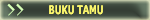
<style>
.page{position:relative;width:150px;height:20px}
.page>*{position:absolute;margin:0}
.t1{font:48px "Parchment-Regular";color:#d5feb5}
.t2{font:12px "Verdana-Bold";color:#fcf76d;scale:0.68 1}
</style>
<div class="page">
<p class="t1" style="left:7px;top:3px;width:17px;height:13px">&gt;&gt;</p>
<p class="t2" style="left:49px;top:5px;width:54px;height:10px">BUKU TAMU</p>
</div>
